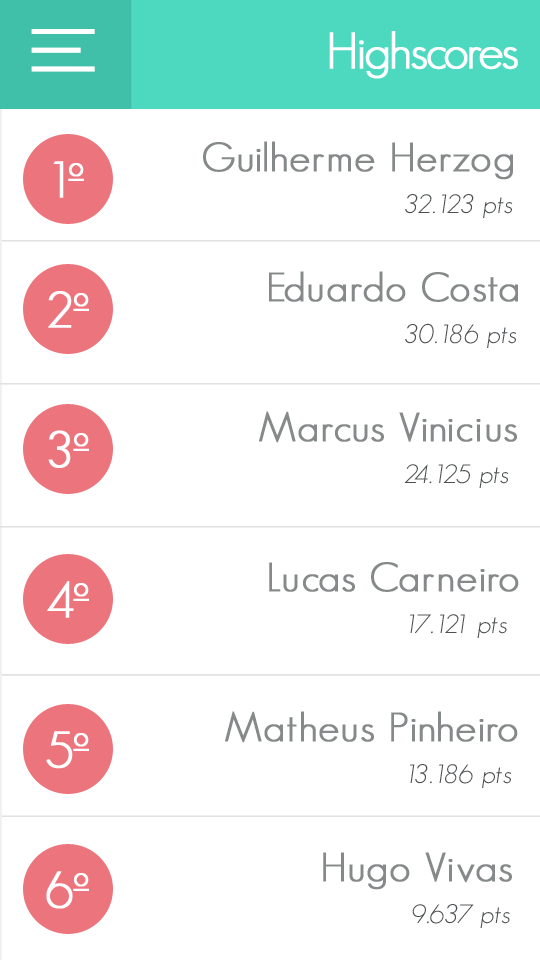
<style>
.page{position:relative;width:540px;height:960px;background:#ffffff}
.page>*{position:absolute;margin:0}
.t1{font:50px "GeosansLight";letter-spacing:-0.05em;color:#ffffff;font-weight:bold}
.t2{font:40px "GeosansLight";letter-spacing:0.018em;color:#86898a;font-weight:bold;scale:1.03 1}
.t3{font:50px "GeosansLight";letter-spacing:-0.15em;color:#ffffff;font-weight:bold}
.t4{font:26px "GeosansLight-Oblique";letter-spacing:0.018em;color:#4d5052;scale:1.03 1}
</style>
<div class="page">
<p class="t1" style="left:329px;top:31px;width:189px;height:48px">Highscores</p>
<p class="t2" style="left:203px;top:141px;width:310px;height:39px">Guilherme Herzog</p>
<p class="t3" style="left:53px;top:161px;width:31px;height:37px">1º</p>
<p class="t4" style="left:405px;top:194px;width:108px;height:24px">32.123 pts</p>
<p class="t2" style="left:269px;top:271px;width:249px;height:31px">Eduardo Costa</p>
<p class="t1" style="left:48px;top:291px;width:41px;height:37px">2º</p>
<p class="t4" style="left:405px;top:323px;width:112px;height:25px">30.186 pts</p>
<p class="t2" style="left:259px;top:411px;width:258px;height:32px">Marcus Vinicius</p>
<p class="t1" style="left:48px;top:430px;width:41px;height:38px">3º</p>
<p class="t4" style="left:404px;top:464px;width:105px;height:24px">24.125 pts</p>
<p class="t2" style="left:269px;top:562px;width:250px;height:30px">Lucas Carneiro</p>
<p class="t1" style="left:47px;top:581px;width:42px;height:37px">4º</p>
<p class="t4" style="left:410px;top:614px;width:97px;height:24px">17.121 pts</p>
<p class="t2" style="left:225px;top:711px;width:293px;height:32px">Matheus Pinheiro</p>
<p class="t1" style="left:46px;top:731px;width:43px;height:38px">5º</p>
<p class="t4" style="left:410px;top:764px;width:102px;height:24px">13.186 pts</p>
<p class="t2" style="left:323px;top:852px;width:189px;height:38px">Hugo Vivas</p>
<p class="t1" style="left:46px;top:871px;width:43px;height:38px">6º</p>
<p class="t4" style="left:412px;top:904px;width:98px;height:24px">9.637 pts</p>
</div>
